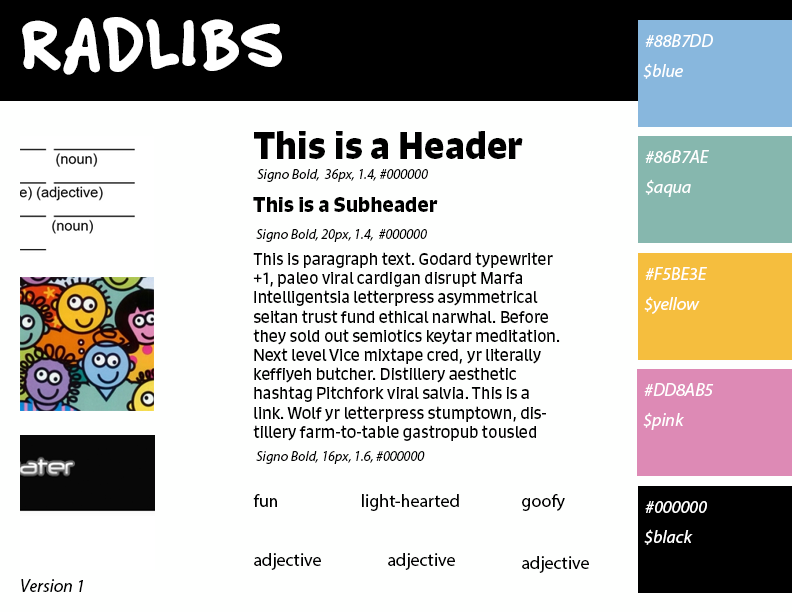
<style>
.page{position:relative;width:792px;height:612px;background:#fefffe}
.page>*{position:absolute;margin:0}
.t1{font:72px "FeltTipRoman-Heavy";color:#ffffff}
.t2{font:18px "MyriadPro-It";color:#ffffff}
.t3{font:36px "Signo-Bold";color:#000000}
.t4{font:14px "MyriadPro-It";color:#000000}
.t5{font:20px "Signo-Bold";color:#000000}
.t6{font:16px "Signo-Regular";color:#000000}
.t7{font:18px "MyriadPro-Regular";color:#000000}
.t8{font:18px "MyriadPro-It";color:#000000}
</style>
<div class="page">
<p class="t1" style="left:22px;top:17px;width:260px;height:58px">RADLIBS</p>
<p class="t2" style="left:645px;top:34px;width:68px;height:13px">#88B7DD</p>
<p class="t2" style="left:643px;top:63px;width:40px;height:16px">$blue</p>
<p class="t3" style="left:254px;top:131px;width:269px;height:28px">This is a Header</p>
<p class="t2" style="left:645px;top:150px;width:64px;height:13px">#86B7AE</p>
<p class="t4" style="left:257px;top:169px;width:171px;height:13px">Signo Bold,  36px, 1.4, #000000</p>
<p class="t2" style="left:645px;top:179px;width:46px;height:18px">$aqua</p>
<p class="t5" style="left:253px;top:197px;width:185px;height:15px">This is a Subheader</p>
<p class="t4" style="left:256px;top:229px;width:171px;height:13px">Signo Bold, 20px, 1.4,  #000000</p>
<p class="t6" style="left:253px;top:252px;width:307px;height:189px">This is paragraph text. Godard typewriter +1, paleo viral cardigan disrupt Marfa Intelligentsia letterpress asymmetrical seitan trust fund ethical narwhal. Before they sold out semiotics keytar meditation. Next level Vice mixtape cred, yr literally keffiyeh butcher. Distillery aesthetic hashtag Pitchfork viral salvia. This is a link. Wolf yr letterpress stumptown, distillery farm-to-table gastropub tousled iPhone vegan kale chips semiotics.</p>
<p class="t2" style="left:645px;top:267px;width:62px;height:13px">#F5BE3E</p>
<p class="t2" style="left:644px;top:296px;width:56px;height:18px">$yellow</p>
<p class="t2" style="left:644px;top:383px;width:70px;height:13px">#DD8AB5</p>
<p class="t2" style="left:643px;top:412px;width:41px;height:18px">$pink</p>
<p class="t4" style="left:256px;top:451px;width:169px;height:13px">Signo Bold, 16px, 1.6, #000000</p>
<p class="t7" style="left:253px;top:494px;width:24px;height:13px">fun</p>
<p class="t7" style="left:362px;top:494px;width:97px;height:17px">light-hearted</p>
<p class="t7" style="left:522px;top:494px;width:43px;height:17px">goofy</p>
<p class="t2" style="left:645px;top:501px;width:62px;height:12px">#000000</p>
<p class="t2" style="left:644px;top:529px;width:49px;height:16px">$black</p>
<p class="t7" style="left:254px;top:553px;width:67px;height:17px">adjective</p>
<p class="t7" style="left:388px;top:553px;width:67px;height:17px">adjective</p>
<p class="t7" style="left:522px;top:556px;width:67px;height:17px">adjective</p>
<p class="t8" style="left:21px;top:579px;width:62px;height:13px">Version 1</p>
</div>
